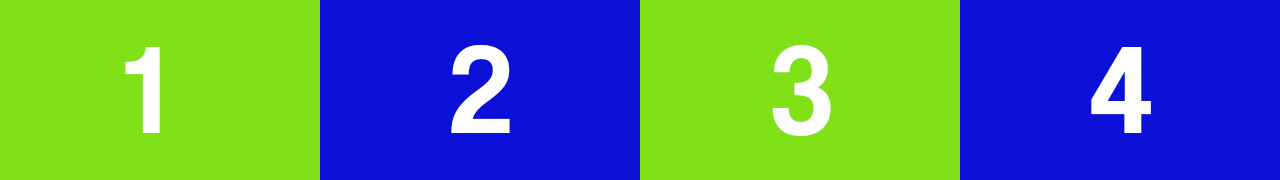
<style>
.page{position:relative;width:1280px;height:180px;background:#7fe116}
.page>*{position:absolute;margin:0}
.t1{font:128px "CoolveticaRg-Regular";color:#ffffff}
</style>
<div class="page">
<p class="t1" style="left:125px;top:47px;width:35px;height:86px">1</p>
<p class="t1" style="left:451px;top:44px;width:59px;height:89px">2</p>
<p class="t1" style="left:772px;top:45px;width:59px;height:91px">3</p>
<p class="t1" style="left:1091px;top:47px;width:60px;height:86px">4</p>
</div>
